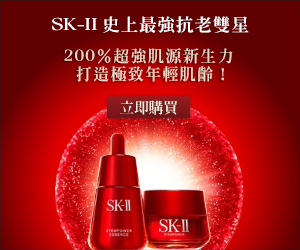
<style>
.page{position:relative;width:300px;height:250px}
.page>*{position:absolute;margin:0}
.t1{font:17.5px "HanWangMingHeavy";color:#ffffff;text-transform:uppercase;scale:1.09 1}
.t2{font:17.2px "HanWangMingHeavy";letter-spacing:0.04em;color:#ffffff;text-transform:uppercase;scale:1.03 1}
.t3{font:16px/18px "HanWangMingHeavy";letter-spacing:0.1em;color:#ebd5c2;text-transform:uppercase}
</style>
<div class="page">
<p class="t1" style="left:52px;top:17px;width:45px;height:14px">SK-II</p>
<p class="t2" style="left:103px;top:16px;width:146px;height:17px">史上最強抗老雙星</p>
<p class="t3" style="left:64px;top:48px;width:169px;height:34px;text-align:center">200％超強肌源新生力<br> 打造極致年輕肌齡！</p>
</div>
